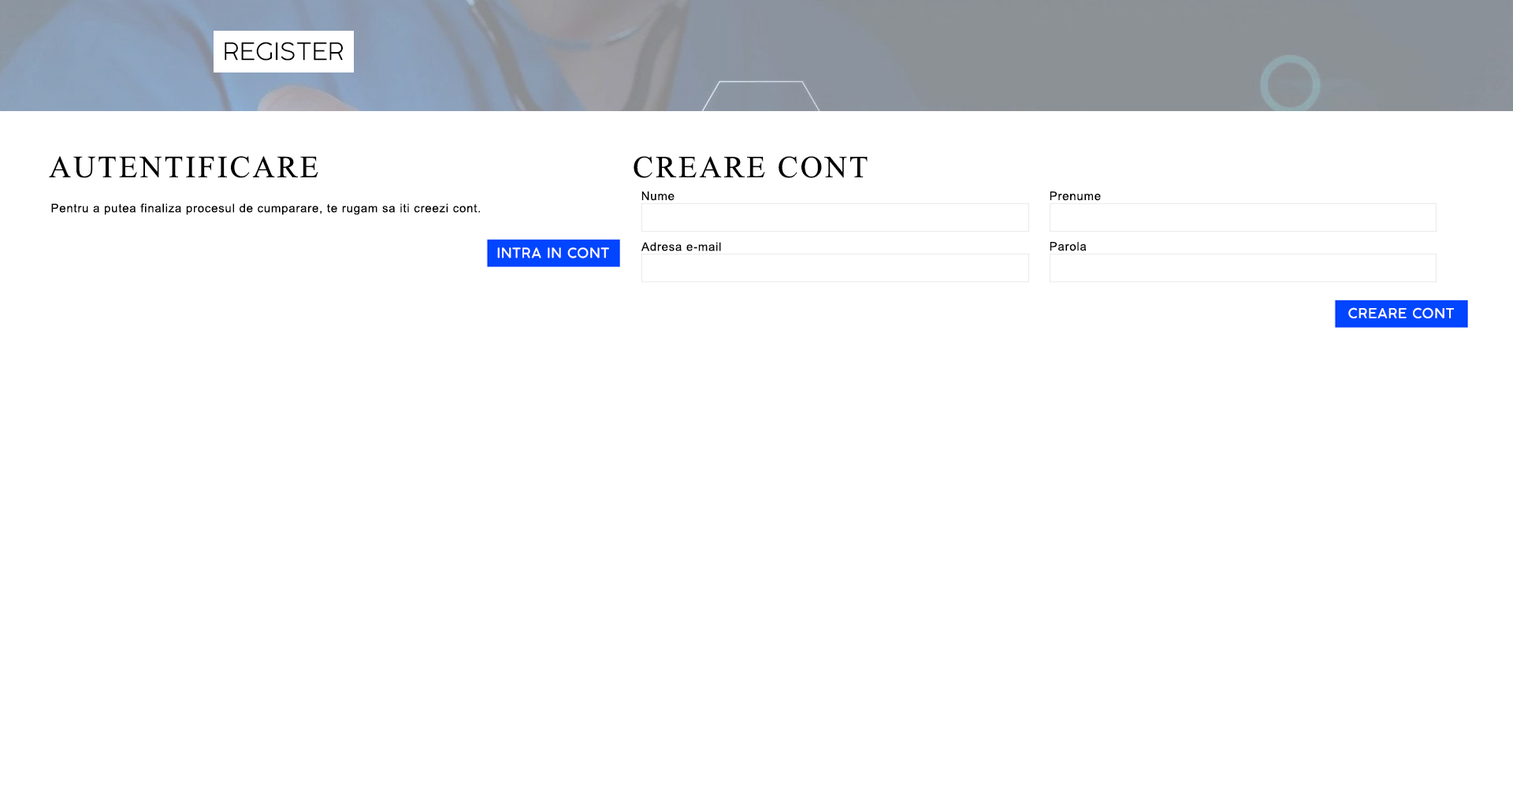
<style>
.page{position:relative;width:1513px;height:788px;background:#ffffff}
.page>*{position:absolute;margin:0}
.t1{font:23.7px "COCOGOOSE-UltraLight";letter-spacing:0.025em;color:#000000}
.t2{font:45.8px "Microsoft-Himalaya";letter-spacing:0.05em;color:#000000}
.t3{font:11.8px "ArialMT";letter-spacing:0.05em;color:#000000}
.t4{font:13.5px "Cocogoose-Light";letter-spacing:0.05em;color:#ffffff}
</style>
<div class="page">
<p class="t1" style="left:225px;top:42px;width:118px;height:19px">REGISTER</p>
<p class="t2" style="left:49px;top:156px;width:269px;height:22px">AUTENTIFICARE</p>
<p class="t2" style="left:634px;top:156px;width:234px;height:22px">CREARE CONT</p>
<p class="t3" style="left:641px;top:192px;width:34px;height:9px">Nume</p>
<p class="t3" style="left:1050px;top:192px;width:51px;height:9px">Prenume</p>
<p class="t3" style="left:51px;top:203px;width:429px;height:12px">Pentru a putea finaliza procesul de cumparare, te rugam sa iti creezi cont.</p>
<p class="t3" style="left:641px;top:242px;width:80px;height:9px">Adresa e-mail</p>
<p class="t3" style="left:1050px;top:242px;width:37px;height:9px">Parola</p>
<p class="t4" style="left:497px;top:247px;width:112px;height:11px">INTRA IN CONT</p>
<p class="t4" style="left:1348px;top:307px;width:106px;height:11px">CREARE CONT</p>
</div>
